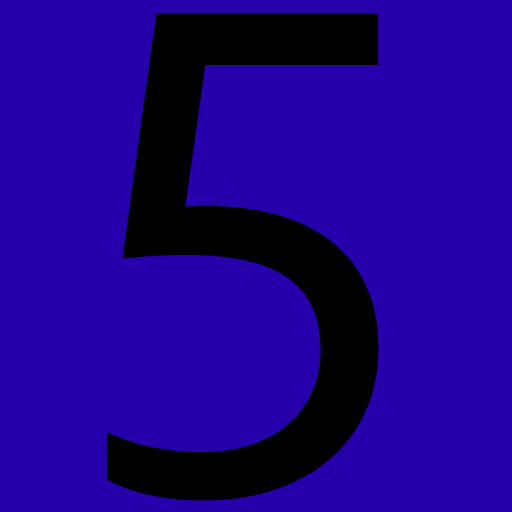
<style>
.page{position:relative;width:512px;height:512px;background:#2500ab}
.page>*{position:absolute;margin:0}
.t1{font:731px "Corbel";color:#000000}
</style>
<div class="page">
<p class="t1" style="left:106px;top:13px;width:273px;height:488px">5</p>
</div>
